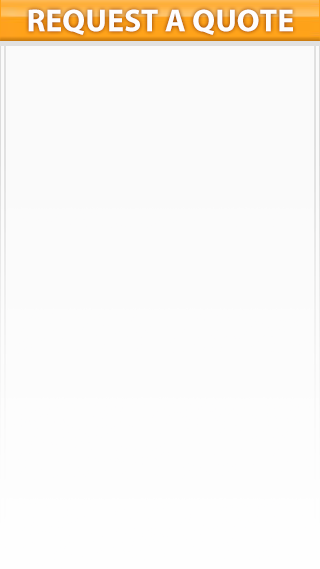
<style>
.page{position:relative;width:320px;height:569px;background:#fafafa}
.page>*{position:absolute;margin:0}
.t1{font:31.8px "MyriadPro-Bold";color:#fefdfd}
</style>
<div class="page">
<p class="t1" style="left:28px;top:9px;width:265px;height:26px">REQUEST A QUOTE</p>
</div>
